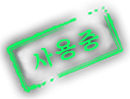
<style>
.page{position:relative;width:130px;height:99px;background:#ffffff}
.page>*{position:absolute;margin:0}
.t1{font:24px "SDKukdetopokki-aLt";letter-spacing:0.1em;color:#09fe63}
.t2{font:24px "SDKukdetopokki-aLt";letter-spacing:0.12em;color:#09fe63}
</style>
<div class="page">
<p class="t1" style="left:33px;top:29px;width:66px;height:41px;rotate:-22deg"><span class="t2">사</span>용중</p>
</div>
